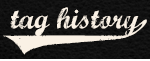
<style>
.page{position:relative;width:150px;height:61px}
.page>*{position:absolute;margin:0}
.t1{font:30px "MarcelleScript";color:#faf1e5}
.t2{font:30px "MarcelleSwashes";color:#faf1e5}
</style>
<div class="page">
<p class="t1" style="left:3px;top:7px;width:144px;height:48px">tag history<span class="t2">z</span></p>
</div>
